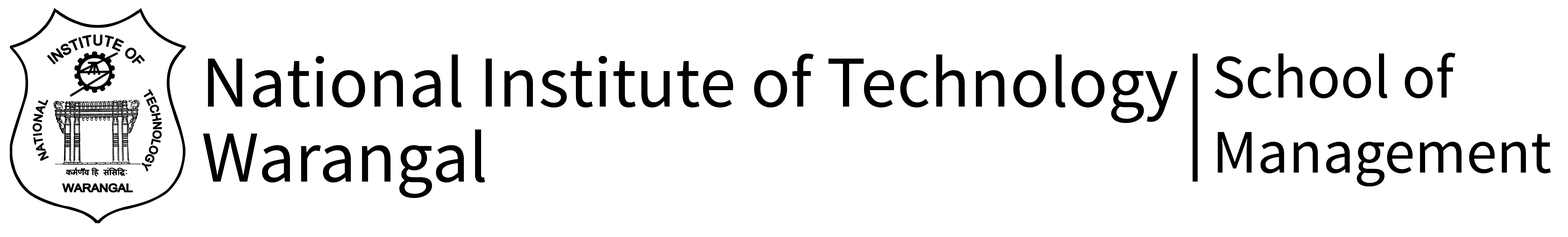
<style>
.page{position:relative;width:1568px;height:237px;background:#ffffff}
.page>*{position:absolute;margin:0}
.t1{font:73px/37.5px "SourceSansPro-Regular";color:#000000}
.t2{font:61.8px/37.5px "SourceSansPro-Regular";color:#000000}
</style>
<div class="page">
<p class="t1" style="left:203px;top:53px;width:975px;height:145px">National Institute of Technology <br><br>Warangal</p>
<p class="t2" style="left:1215px;top:52px;width:336px;height:134px">School of <br><br>Management</p>
</div>
